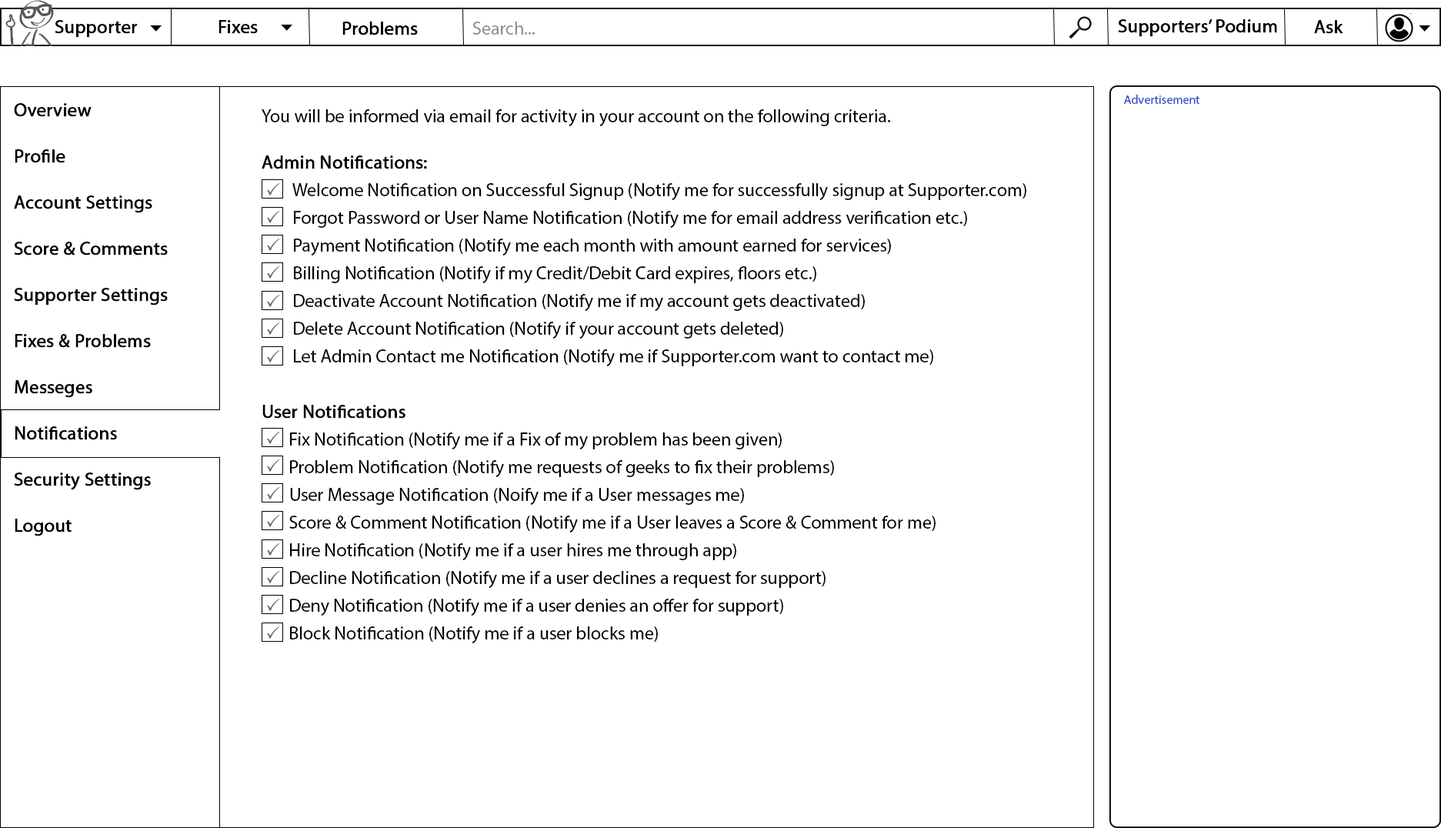
<style>
.page{position:relative;width:1441px;height:828px;background:#ffffff}
.page>*{position:absolute;margin:0}
.t1{font:18.5px "MyriadPro-Regular";color:#000000;font-weight:bold}
.t2{font:18.5px "MyriadPro-Regular";color:#919090}
.t3{font:18.5px "MyriadPro-Regular";color:#010000;font-weight:bold}
.t4{font:12.3px "MyriadPro-Regular";color:#2d4fc9}
.t5{font:18.5px/46.2px "MyriadPro-Regular";color:#000000;font-weight:bold}
.t6{font:18.5px/27.7px "MyriadPro-Regular";color:#000000}
.t7{font:18.5px/46.2px "MyriadPro-Regular";color:#000000}
.t8{font:18.5px/27.7px "MyriadPro-Regular";color:#000000;font-weight:bold}
</style>
<div class="page">
<p class="t1" style="left:55px;top:20px;width:83px;height:18px">Supporter</p>
<p class="t1" style="left:218px;top:20px;width:40px;height:14px">Fixes</p>
<p class="t1" style="left:342px;top:22px;width:76px;height:13px">Problems</p>
<p class="t2" style="left:472px;top:22px;width:63px;height:13px">Search...</p>
<p class="t3" style="left:1118px;top:19px;width:159px;height:18px">Supporters’ Podium</p>
<p class="t1" style="left:1314px;top:20px;width:29px;height:14px">Ask</p>
<p class="t4" style="left:1124px;top:95px;width:75px;height:9px">Advertisement</p>
<p class="t5" style="left:14px;top:103px;width:154px;height:433px">Overview<br>Profile<br>Account Settings<br>Score &amp; Comments<br>Supporter Settings<br>Fixes &amp; Problems<br>Messeges<br>Notifications<br>Security Settings<br>Logout</p>
<p class="t6" style="left:262px;top:109px;width:764px;height:534px"><span class="t7">You will be informed via email for activity in your account on the following criteria.<br></span><span class="t5">Admin Notifications:<br></span>        Welcome Notification on Successful Signup (Notify me for successfully signup at Supporter.com)<br>        Forgot Password or User Name Notification (Notify me for email address verification etc.)<br>        Payment Notification (Notify me each month with amount earned for services)<br>        Billing Notification (Notify if my Credit/Debit Card expires, floors etc.)<br>        Deactivate Account Notification (Notify me if my account gets deactivated)<br>        Delete Account Notification (Notify if your account gets deleted)<br>        Let Admin Contact me Notification (Notify me if Supporter.com want to contact me)<br><br><span class="t8">User Notifications<br></span>       Fix Notification (Notify me if a Fix of my problem has been given)<br>       Problem Notification (Notify me requests of geeks to fix their problems)<br> User Message Notification (Noify me if a User messages me)<br>       Score &amp; Comment Notification (Notify me if a User leaves a Score &amp; Comment for me)<br>       Hire Notification (Notify me if a user hires me through app)<br>       Decline Notification (Notify me if a user declines a request for support)<br>       Deny Notification (Notify me if a user denies an offer for support)<br>       Block Notification (Notify me if a user blocks me)</p>
</div>
